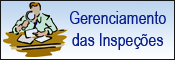
<style>
.page{position:relative;width:175px;height:60px}
.page>*{position:absolute;margin:0}
.t1{font:18px "ArialNarrow";color:#091d8d;scale:0.96 1}
</style>
<div class="page">
<p class="t1" style="left:70px;top:11px;width:96px;height:39px;text-align:center">Gerenciamento<br>das Inspeções</p>
</div>
